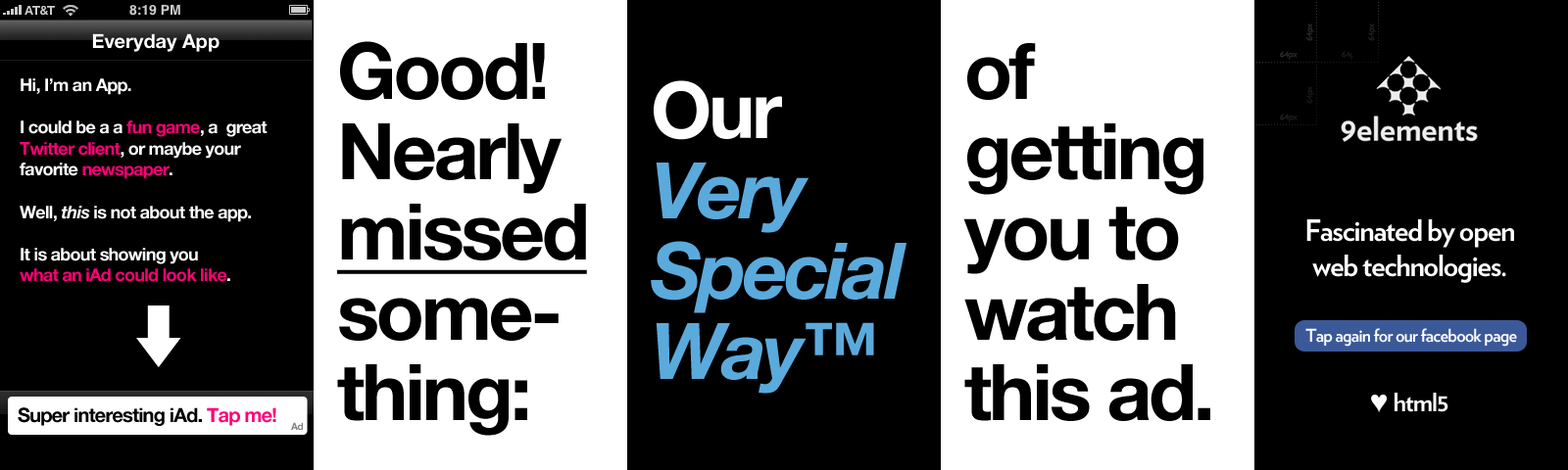
<style>
.page{position:relative;width:1568px;height:470px;background:#000000}
.page>*{position:absolute;margin:0}
.t1{font:9.8px "Verlag-Book";letter-spacing:-0.04em;color:#2a2a2a}
.t2{font:9.8px "Verlag-Book";letter-spacing:-0.04em;color:#1f1f1f}
.t3{font:78.4px/80.4px "HelveticaNeue-Bold";letter-spacing:-0.04em;color:#000000}
.t4{font:78.4px/80.4px "HelveticaNeue-Bold";letter-spacing:-0.04em;color:#000000;text-decoration:underline}
.t5{font:9.8px "Verlag-Book";letter-spacing:-0.04em;color:#2c2c2c}
.t6{font:9.8px "Verlag-Book";letter-spacing:-0.04em}
.t7{font:17.6px "HelveticaNeue-Bold";letter-spacing:-0.04em;color:#ffffff}
.t8{font:17.6px "HelveticaNeue-Bold";letter-spacing:-0.04em;color:#ff0077}
.t9{font:17.6px "HelveticaNeue-BoldItalic";letter-spacing:-0.04em;color:#ffffff}
.t10{font:78.4px/80.4px "HelveticaNeue-BoldItalic";letter-spacing:-0.04em;color:#5baadc}
.t11{font:78.4px/80.4px "HelveticaNeue-Bold";letter-spacing:-0.04em;color:#ffffff}
.t12{font:9.8px "Verlag-Book";letter-spacing:-0.04em;color:#181818}
.t13{font:9.8px "Verlag-Book";letter-spacing:-0.04em;color:#202020}
.t14{font:29.4px "Verlag-Bold";letter-spacing:-0.04em;color:#ffffff}
.t15{font:17.6px "Verlag-Bold";letter-spacing:-0.04em;color:#ffffff}
.t16{font:29.4px "Arial-Black";letter-spacing:-0.04em;color:#ffffff}
.t17{font:25.5px "Verlag-Bold";letter-spacing:-0.04em;color:#ffffff}
.t18{font:19.6px "HelveticaNeue-Bold";letter-spacing:-0.04em;color:#000000}
.t19{font:19.6px "HelveticaNeue-Bold";letter-spacing:-0.04em;color:#ff0077}
.t20{font:9.8px "HelveticaNeue-Bold";letter-spacing:-0.04em;color:#7f7f7f}
</style>
<div class="page">
<p class="t1" style="left:1305px;top:24px;width:10px;height:17px;rotate:-90deg">64px</p>
<p class="t2" style="left:1367px;top:24px;width:10px;height:17px;rotate:-90deg">64px</p>
<p class="t3" style="left:337px;top:41px;width:250px;height:395px">Good!<br>Nearly<br><span class="t4">missed<br></span>some-<br>thing:</p>
<p class="t3" style="left:963px;top:43px;width:247px;height:378px">of<br>getting<br>you to<br>watch<br>this ad.</p>
<p class="t5" style="left:1280px;top:51px;width:18px;height:9px">64px</p>
<p class="t6" style="left:1342px;top:51px;width:17px;height:9px">64px</p>
<p class="t7" style="left:20px;top:78px;width:248px;height:204px">Hi, I’m an App.<br><br>I could be a a <span class="t8">fun game</span>, a  great<br><span class="t8">Twitter client</span>, or maybe your<br>favorite <span class="t8">newspaper</span>.<br><br>Well, <span class="t9">this </span>is not about the app.<br><br>It is about showing you<br><span class="t8">what an iAd could look like</span>.</p>
<p class="t10" style="left:651px;top:80px;width:255px;height:314px"><span class="t11">Our<br></span>Very<br>Special<br>Way™</p>
<p class="t12" style="left:1305px;top:86px;width:10px;height:18px;rotate:-90deg">64px</p>
<p class="t13" style="left:1280px;top:114px;width:18px;height:8px">64px</p>
<p class="t14" style="left:1306px;top:220px;width:208px;height:63px;text-align:center">Fascinated by open<br>web technologies.</p>
<p class="t15" style="left:1305px;top:328px;width:212px;height:19px">Tap again for our facebook page</p>
<p class="t16" style="left:1371px;top:395px;width:16px;height:19px">♥</p>
<p class="t17" style="left:1395px;top:393px;width:53px;height:20px">html5</p>
<p class="t18" style="left:18px;top:408px;width:258px;height:18px">Super interesting iAd. <span class="t19">Tap me!</span></p>
<p class="t20" style="left:291px;top:422px;width:12px;height:8px">Ad</p>
</div>
